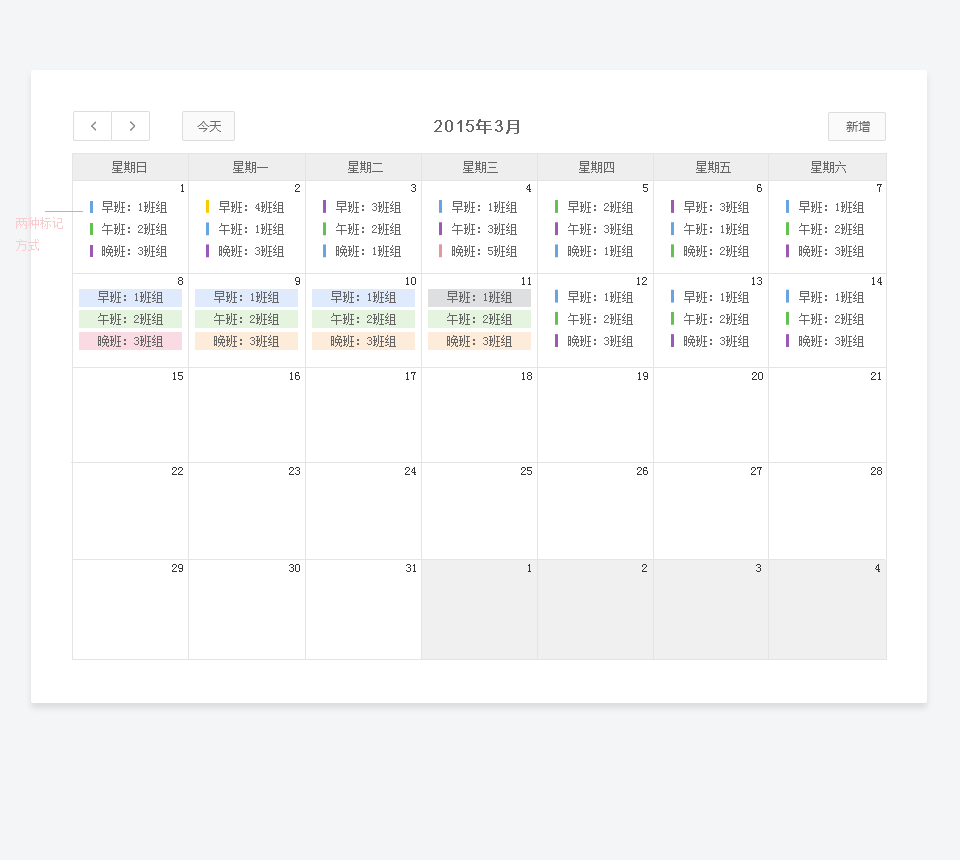
<style>
.page{position:relative;width:960px;height:860px;background:#ffffff}
.page>*{position:absolute;margin:0}
.t1{font:12px "MicrosoftYaHei";color:#6c6c6c}
.t2{font:16px "ArialMT";letter-spacing:0.05em;color:#666666;font-weight:bold}
.t3{font:16px "MicrosoftYaHei";letter-spacing:0.05em;color:#666666;font-weight:bold}
.t4{font:12px "SimSun";color:#666666}
.t5{font:12px "SimSun";color:#333333}
.t6{font:12px/22px "SimSun";color:#666666}
.t7{font:12px/22px "SimSun";color:#f9cdcf}
</style>
<div class="page">
<p class="t1" style="left:197px;top:121px;width:24px;height:11px">今天</p>
<p class="t2" style="left:434px;top:119px;width:85px;height:15px">2015<span class="t3">年</span>3<span class="t3">月</span></p>
<p class="t1" style="left:846px;top:121px;width:24px;height:11px">新增</p>
<p class="t4" style="left:112px;top:161px;width:34px;height:12px">星期日</p>
<p class="t4" style="left:233px;top:161px;width:35px;height:12px">星期一</p>
<p class="t4" style="left:348px;top:161px;width:35px;height:12px">星期二</p>
<p class="t4" style="left:463px;top:161px;width:35px;height:12px">星期三</p>
<p class="t4" style="left:579px;top:161px;width:35px;height:12px">星期四</p>
<p class="t4" style="left:696px;top:161px;width:35px;height:12px">星期五</p>
<p class="t4" style="left:811px;top:161px;width:35px;height:12px">星期六</p>
<p class="t5" style="left:181px;top:184px;width:3px;height:8px">1</p>
<p class="t5" style="left:295px;top:184px;width:5px;height:8px">2</p>
<p class="t5" style="left:411px;top:184px;width:5px;height:8px">3</p>
<p class="t5" style="left:526px;top:184px;width:5px;height:8px">4</p>
<p class="t5" style="left:643px;top:184px;width:5px;height:8px">5</p>
<p class="t5" style="left:757px;top:184px;width:5px;height:8px">6</p>
<p class="t5" style="left:877px;top:184px;width:5px;height:8px">7</p>
<p class="t6" style="left:102px;top:201px;width:65px;height:56px">早班：1班组<br>午班：2班组<br>晚班：3班组</p>
<p class="t6" style="left:219px;top:201px;width:65px;height:56px">早班：4班组<br>午班：1班组<br>晚班：3班组</p>
<p class="t6" style="left:336px;top:201px;width:65px;height:56px">早班：3班组<br>午班：2班组<br>晚班：1班组</p>
<p class="t6" style="left:452px;top:201px;width:65px;height:56px">早班：1班组<br>午班：3班组<br>晚班：5班组</p>
<p class="t6" style="left:568px;top:201px;width:65px;height:56px">早班：2班组<br>午班：3班组<br>晚班：1班组</p>
<p class="t6" style="left:684px;top:201px;width:65px;height:56px">早班：3班组<br>午班：1班组<br>晚班：2班组</p>
<p class="t6" style="left:799px;top:201px;width:65px;height:56px">早班：1班组<br>午班：2班组<br>晚班：3班组</p>
<p class="t7" style="left:16px;top:217px;width:47px;height:34px">两种标记<br>方式</p>
<p class="t5" style="left:178px;top:277px;width:5px;height:8px">8</p>
<p class="t5" style="left:295px;top:277px;width:5px;height:8px">9</p>
<p class="t5" style="left:406px;top:277px;width:10px;height:8px">10</p>
<p class="t5" style="left:522px;top:277px;width:9px;height:8px">11</p>
<p class="t5" style="left:637px;top:277px;width:10px;height:8px">12</p>
<p class="t5" style="left:752px;top:277px;width:10px;height:8px">13</p>
<p class="t5" style="left:872px;top:277px;width:10px;height:8px">14</p>
<p class="t6" style="left:98px;top:291px;width:65px;height:56px">早班：1班组<br>午班：2班组<br>晚班：3班组</p>
<p class="t6" style="left:214px;top:291px;width:65px;height:56px">早班：1班组<br>午班：2班组<br>晚班：3班组</p>
<p class="t6" style="left:331px;top:291px;width:65px;height:56px">早班：1班组<br>午班：2班组<br>晚班：3班组</p>
<p class="t6" style="left:447px;top:291px;width:65px;height:56px">早班：1班组<br>午班：2班组<br>晚班：3班组</p>
<p class="t6" style="left:568px;top:291px;width:65px;height:56px">早班：1班组<br>午班：2班组<br>晚班：3班组</p>
<p class="t6" style="left:684px;top:291px;width:65px;height:56px">早班：1班组<br>午班：2班组<br>晚班：3班组</p>
<p class="t6" style="left:799px;top:291px;width:65px;height:56px">早班：1班组<br>午班：2班组<br>晚班：3班组</p>
<p class="t5" style="left:173px;top:372px;width:10px;height:8px">15</p>
<p class="t5" style="left:290px;top:372px;width:10px;height:8px">16</p>
<p class="t5" style="left:406px;top:372px;width:10px;height:8px">17</p>
<p class="t5" style="left:522px;top:372px;width:10px;height:8px">18</p>
<p class="t5" style="left:638px;top:372px;width:10px;height:8px">19</p>
<p class="t5" style="left:752px;top:372px;width:11px;height:8px">20</p>
<p class="t5" style="left:871px;top:372px;width:10px;height:8px">21</p>
<p class="t5" style="left:172px;top:467px;width:11px;height:8px">22</p>
<p class="t5" style="left:289px;top:467px;width:11px;height:8px">23</p>
<p class="t5" style="left:405px;top:467px;width:11px;height:8px">24</p>
<p class="t5" style="left:521px;top:467px;width:11px;height:8px">25</p>
<p class="t5" style="left:637px;top:467px;width:11px;height:8px">26</p>
<p class="t5" style="left:751px;top:467px;width:11px;height:8px">27</p>
<p class="t5" style="left:871px;top:467px;width:11px;height:8px">28</p>
<p class="t5" style="left:172px;top:564px;width:11px;height:8px">29</p>
<p class="t5" style="left:289px;top:564px;width:11px;height:8px">30</p>
<p class="t5" style="left:406px;top:564px;width:10px;height:8px">31</p>
<p class="t5" style="left:528px;top:564px;width:3px;height:8px">1</p>
<p class="t5" style="left:642px;top:564px;width:5px;height:8px">2</p>
<p class="t5" style="left:756px;top:564px;width:5px;height:8px">3</p>
<p class="t5" style="left:875px;top:564px;width:5px;height:8px">4</p>
</div>
